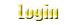
<style>
.page{position:relative;width:75px;height:25px;background:#ffffff}
.page>*{position:absolute;margin:0}
.t1{font:18.7px "Impact"}
</style>
<div class="page">
<p class="t1" style="left:18px;top:4px;width:41px;height:17px">Login</p>
</div>
